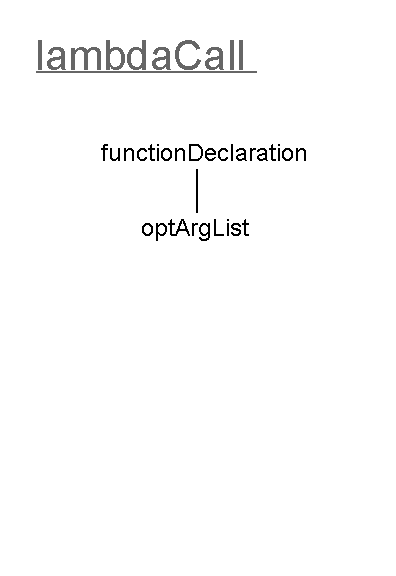
<style>
.page{position:relative;width:396px;height:576px;background:#ffffff}
.page>*{position:absolute;margin:0}
.t1{font:42px "ArialMT";color:#666666}
.t2{font:12px "ArialMT";color:#000000}
</style>
<div class="page">
<p class="t1" style="left:38px;top:40px;width:205px;height:30px">lambdaCall</p>
<p class="t2" style="left:101px;top:144px;width:205px;height:17px">functionDeclaration</p>
<p class="t2" style="left:142px;top:219px;width:107px;height:22px">optArgList</p>
</div>
